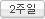
<style>
.page{position:relative;width:45px;height:19px;background:#fefefe}
.page>*{position:absolute;margin:0}
.t1{font:12px "morris9";letter-spacing:-0.025em;color:#484848}
</style>
<div class="page">
<p class="t1" style="left:10px;top:4px;width:25px;height:10px">2주일</p>
</div>
